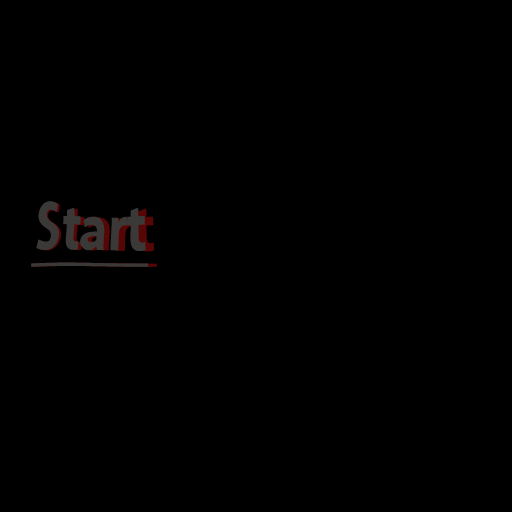
<style>
.page{position:relative;width:512px;height:512px;background:#000000}
.page>*{position:absolute;margin:0}
.t1{font:57.6px "KozGoPr6N-Bold";text-decoration:underline;scale:0.94 1}
.t2{font:58.4px "KozGoPr6N-Bold";color:#3b3838;text-decoration:underline;scale:0.87 1}
</style>
<div class="page">
<p class="t1" style="left:31px;top:202px;width:126px;height:65px">Start</p>
<p class="t2" style="left:31px;top:201px;width:117px;height:66px">Start</p>
</div>
